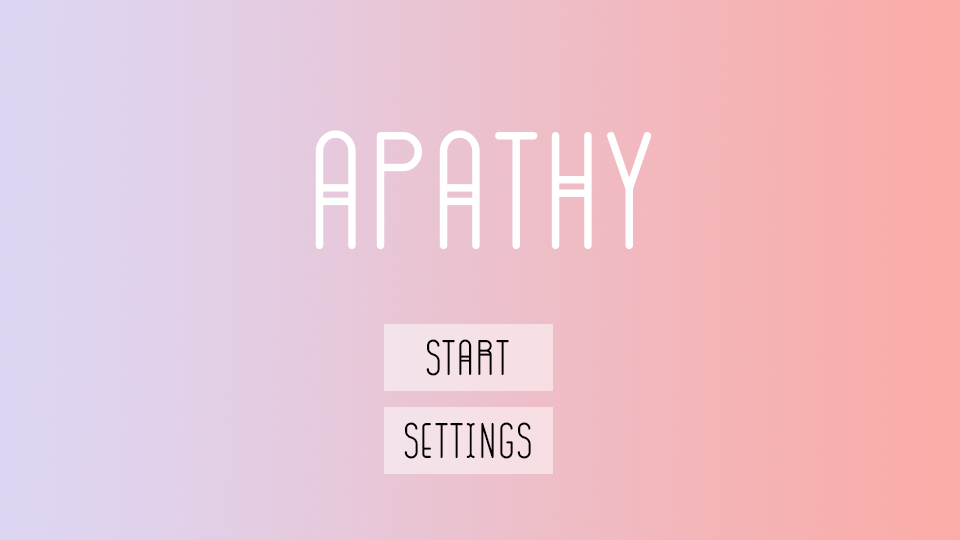
<style>
.page{position:relative;width:960px;height:540px}
.page>*{position:absolute;margin:0}
.t1{font:166.7px "GOGOIA-Deco";color:#ffffff}
.t2{font:50px "GOGOIA-Deco";color:#000000}
</style>
<div class="page">
<p class="t1" style="left:315px;top:130px;width:337px;height:119px">Apathy</p>
<p class="t2" style="left:426px;top:339px;width:83px;height:37px">start</p>
<p class="t2" style="left:404px;top:422px;width:127px;height:37px">settings</p>
</div>
